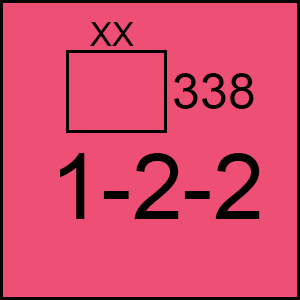
<style>
.page{position:relative;width:300px;height:300px;background:#ee4f74}
.page>*{position:absolute;margin:0}
.t1{font:33.3px "ArialMT";color:#000000}
.t2{font:50px "ArialMT";color:#000000}
.t3{font:91.7px "ArialMT";color:#000000}
</style>
<div class="page">
<p class="t1" style="left:90px;top:22px;width:44px;height:24px">XX</p>
<p class="t2" style="left:174px;top:73px;width:80px;height:36px">338</p>
<p class="t3" style="left:60px;top:153px;width:200px;height:66px">1-2-2</p>
</div>
